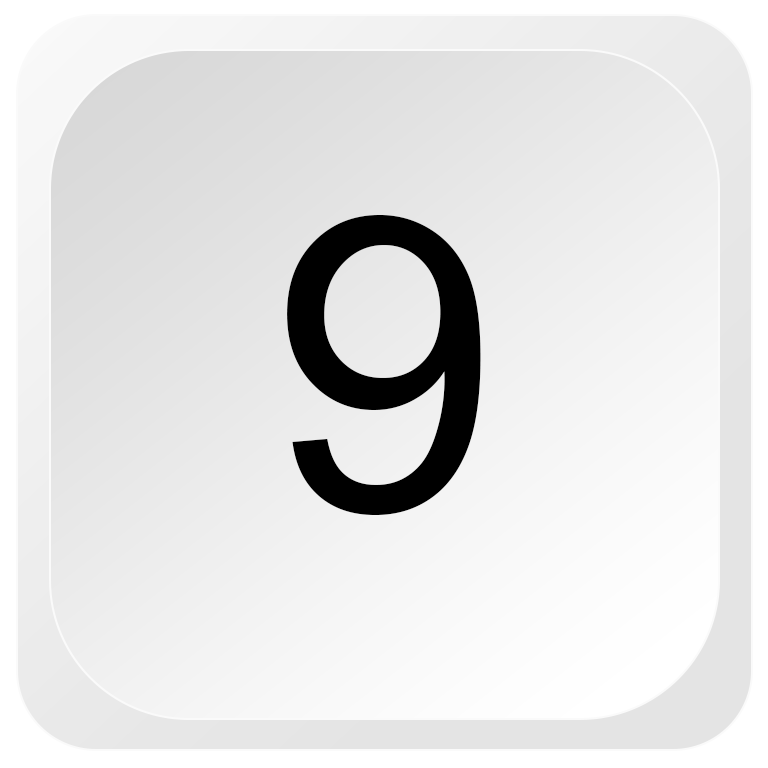
<style>
.page{position:relative;width:768px;height:768px}
.page>*{position:absolute;margin:0}
.t1{font:411px "ArialMT";color:#000000}
</style>
<div class="page">
<p class="t1" style="left:287px;top:215px;width:194px;height:300px">9</p>
</div>
